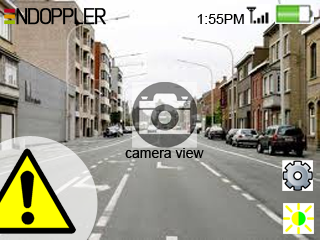
<style>
.page{position:relative;width:320px;height:240px}
.page>*{position:absolute;margin:0}
.t1{font:37.5px "Lintel";letter-spacing:-0.05em;color:#000000;font-variant:small-caps;font-weight:bold}
.t2{font:37.5px "Lintel";color:#ffffff;font-variant:small-caps}
.t3{font:24px "ArialMT";color:#000000}
</style>
<div class="page">
<p class="t1" style="left:16px;top:8px;width:90px;height:17px"><span class="t2">  </span>NDOPPLER</p>
<p class="t3" style="left:197px;top:14px;width:47px;height:10px">1:55PM</p>
<p class="t3" style="left:125px;top:148px;width:79px;height:10px">camera view</p>
</div>
